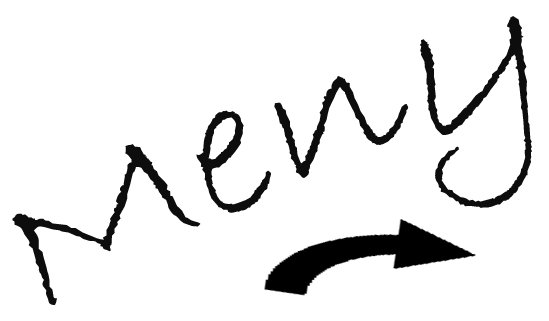
<style>
.page{position:relative;width:549px;height:321px;background:#ffffff}
.page>*{position:absolute;margin:0}
.t1{font:197.1px "BradleyHandITC";color:#0d0d0d}
</style>
<div class="page">
<p class="t1" style="left:12px;top:16px;width:520px;height:289px;rotate:-22deg">Meny</p>
</div>
